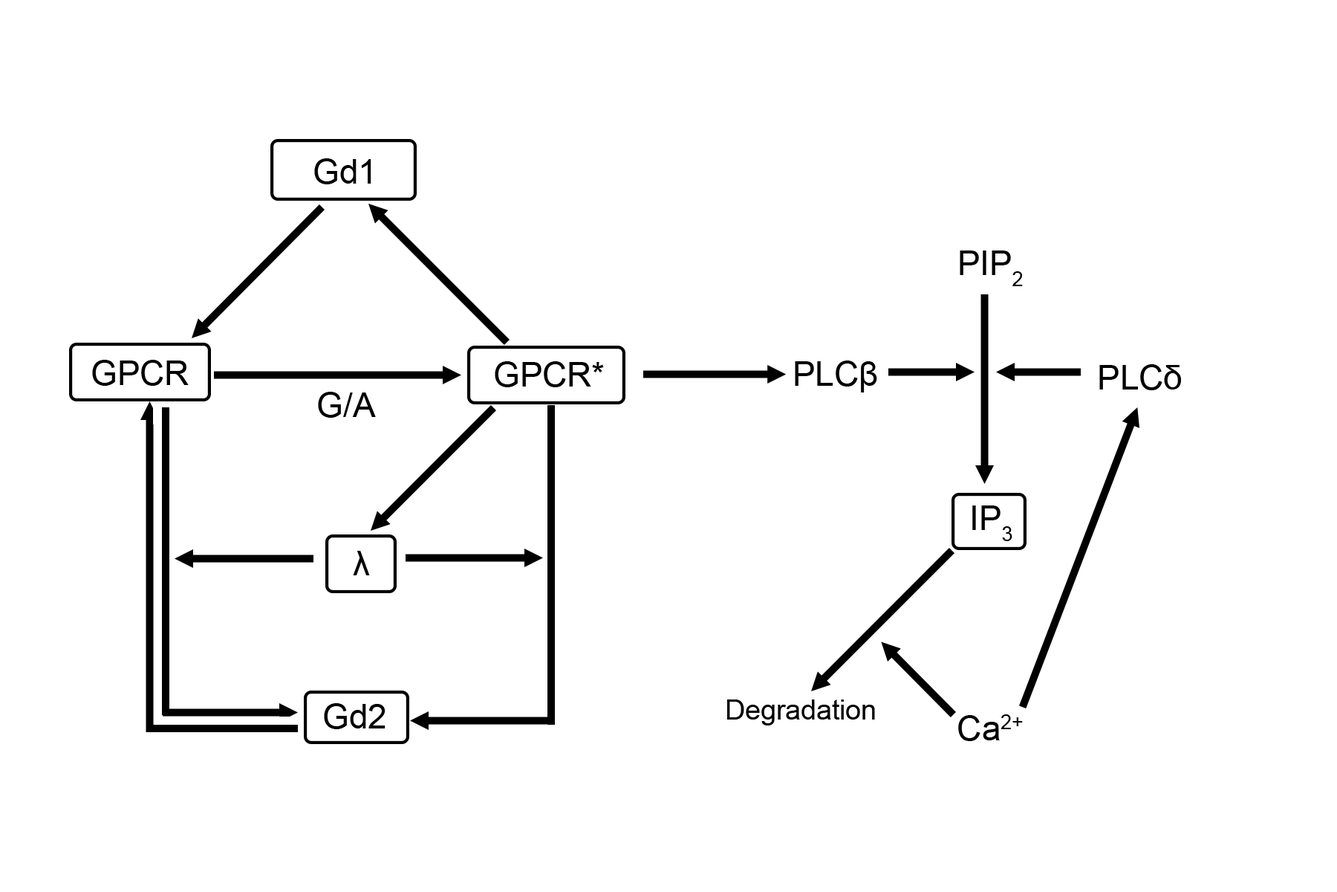
<style>
.page{position:relative;width:1337px;height:892px;background:#ffffff}
.page>*{position:absolute;margin:0}
.t1{font:34.1px "ArialMT";color:#000000}
.t2{font:27.9px "ArialMT";color:#000000}
</style>
<div class="page">
<p class="t1" style="left:314px;top:158px;width:58px;height:26px">Gd1</p>
<p class="t1" style="left:960px;top:250px;width:63px;height:36px">PIP2</p>
<p class="t1" style="left:92px;top:360px;width:97px;height:26px">GPCR</p>
<p class="t1" style="left:495px;top:361px;width:109px;height:26px">GPCR*</p>
<p class="t1" style="left:795px;top:360px;width:82px;height:32px">PLCβ</p>
<p class="t1" style="left:1100px;top:364px;width:81px;height:26px">PLCδ</p>
<p class="t1" style="left:318px;top:392px;width:58px;height:26px">G/A</p>
<p class="t1" style="left:973px;top:505px;width:40px;height:36px">IP3</p>
<p class="t1" style="left:353px;top:551px;width:17px;height:24px">λ</p>
<p class="t2" style="left:727px;top:699px;width:148px;height:26px">Degradation</p>
<p class="t1" style="left:324px;top:703px;width:62px;height:26px">Gd2</p>
<p class="t1" style="left:958px;top:714px;width:65px;height:27px">Ca2+</p>
</div>
